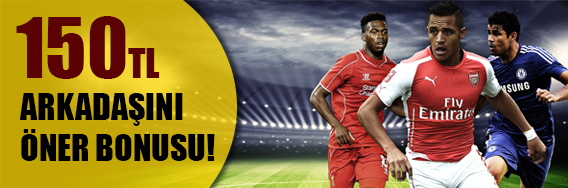
<style>
.page{position:relative;width:568px;height:188px}
.page>*{position:absolute;margin:0}
.t1{font:77px "Impact";color:#5b0202;text-transform:uppercase}
.t2{font:38px "Impact";color:#5b0202;text-transform:uppercase}
.t3{font:34px/29px "Impact";color:#000000;text-transform:uppercase}
</style>
<div class="page">
<p class="t1" style="left:16px;top:16px;width:144px;height:63px">150<span class="t2">tl</span></p>
<p class="t3" style="left:19px;top:93px;width:196px;height:68px">arkadaşını<br>öner bonusu!</p>
</div>
